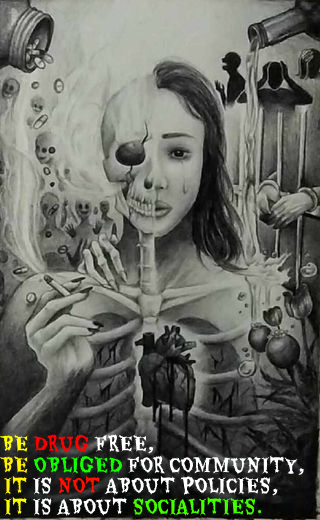
<style>
.page{position:relative;width:320px;height:520px}
.page>*{position:absolute;margin:0}
.t1{font:20px "Eater-Regular";color:#ffffff}
.t2{font:20px "Eater-Regular";color:#ffff00}
.t3{font:20px "Eater-Regular";color:#ff0000}
.t4{font:20px "Eater-Regular";color:#fff100}
.t5{font:20px "Eater-Regular";color:#13ff00}
.t6{font:20px "Eater-Regular";color:#ff1000}
.t7{font:20px "Eater-Regular";color:#43ff00}
.t8{font:20px "Eater-Regular";color:#faff00}
</style>
<div class="page">
<p class="t1" style="left:0px;top:434px;width:154px;height:20px"><span class="t2">BE </span><span class="t3">DRUG </span>FREE,</p>
<p class="t1" style="left:0px;top:455px;width:304px;height:21px"><span class="t4">BE </span><span class="t5">OBLIGED </span>FOR COMMUNITY,</p>
<p class="t1" style="left:3px;top:475px;width:275px;height:21px"><span class="t4">IT </span>IS <span class="t6">NOT </span>ABOUT POLICIES,</p>
<p class="t7" style="left:3px;top:496px;width:259px;height:21px"><span class="t8">IT </span><span class="t1">IS ABOUT </span>SOCIALITIES.</p>
</div>
